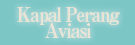
<style>
.page{position:relative;width:135px;height:45px;background:#7dc6c6}
.page>*{position:absolute;margin:0}
.t1{font:20px/16px "RyuminPro-ExBold";letter-spacing:-0.08em;color:#f1e6d8;scale:0.9 1}
</style>
<div class="page">
<p class="t1" style="left:17px;top:7px;width:103px;height:32px;text-align:center">Kapal Perang<br>Aviasi</p>
</div>
